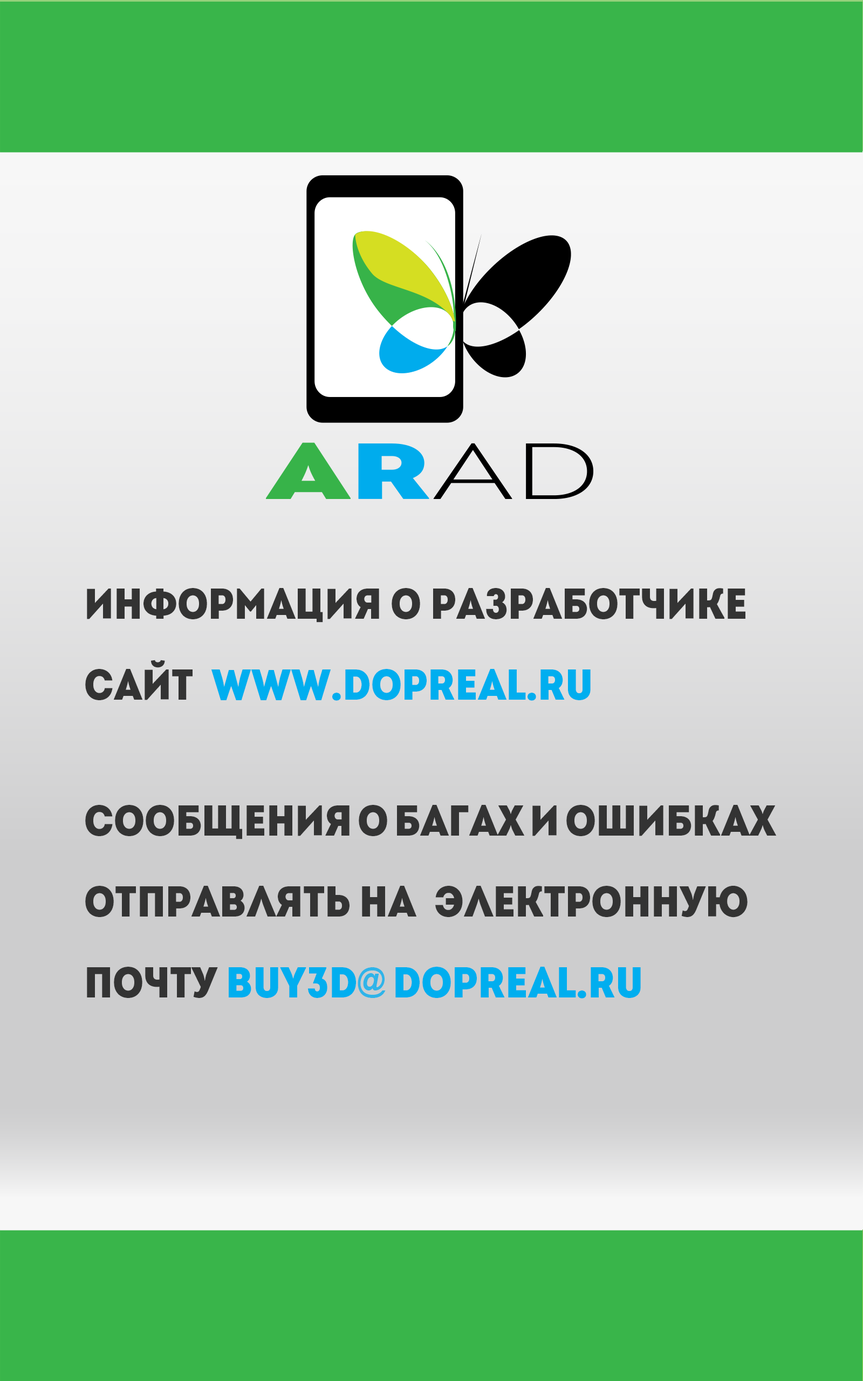
<style>
.page{position:relative;width:863px;height:1381px;background:#39b54a}
.page>*{position:absolute;margin:0}
.t1{font:43.2px/80.9px "IntroCondBlackFree";color:#333333;scale:1.06 1}
.t2{font:43.2px/80.9px "IntroCondBlackFree";color:#00aeef;scale:1.06 1}
.t3{font:31.9px "Arial-BoldMT";color:#2fb4e9;scale:0.92 1}
</style>
<div class="page">
<p class="t1" style="left:85px;top:588px;width:691px;height:411px">Информация о разработчике<br>Сайт  <span class="t2">www.dopreal.ru<br><br></span>Сообщения о багах и ошибках отправлять на  электронную почту <span class="t2">Buy3d    dopreal.ru</span></p>
<p class="t3" style="left:358px;top:967px;width:28px;height:31px">@</p>
</div>
